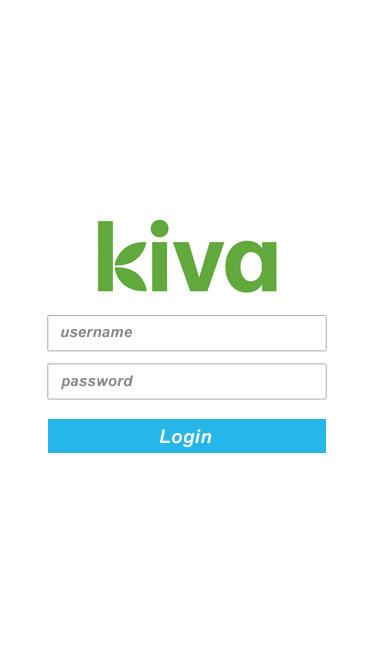
<style>
.page{position:relative;width:375px;height:667px;background:#ffffff}
.page>*{position:absolute;margin:0}
.t1{font:14.7px "Arial-BoldItalicMT";letter-spacing:0.025em;color:#868686}
.t2{font:18.7px "Arial-BoldItalicMT";letter-spacing:0.025em;color:#ffffff}
</style>
<div class="page">
<p class="t1" style="left:61px;top:329px;width:71px;height:9px">username</p>
<p class="t1" style="left:61px;top:375px;width:72px;height:15px">password</p>
<p class="t2" style="left:159px;top:429px;width:53px;height:18px">Login</p>
</div>
